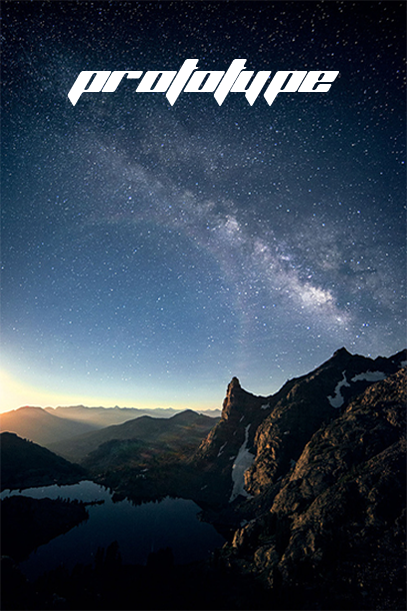
<style>
.page{position:relative;width:407px;height:611px}
.page>*{position:absolute;margin:0}
.t1{font:40px "PlanetKosmos";color:#ffffff}
</style>
<div class="page">
<p class="t1" style="left:67px;top:59px;width:273px;height:47px">PROTOTYPE</p>
</div>
